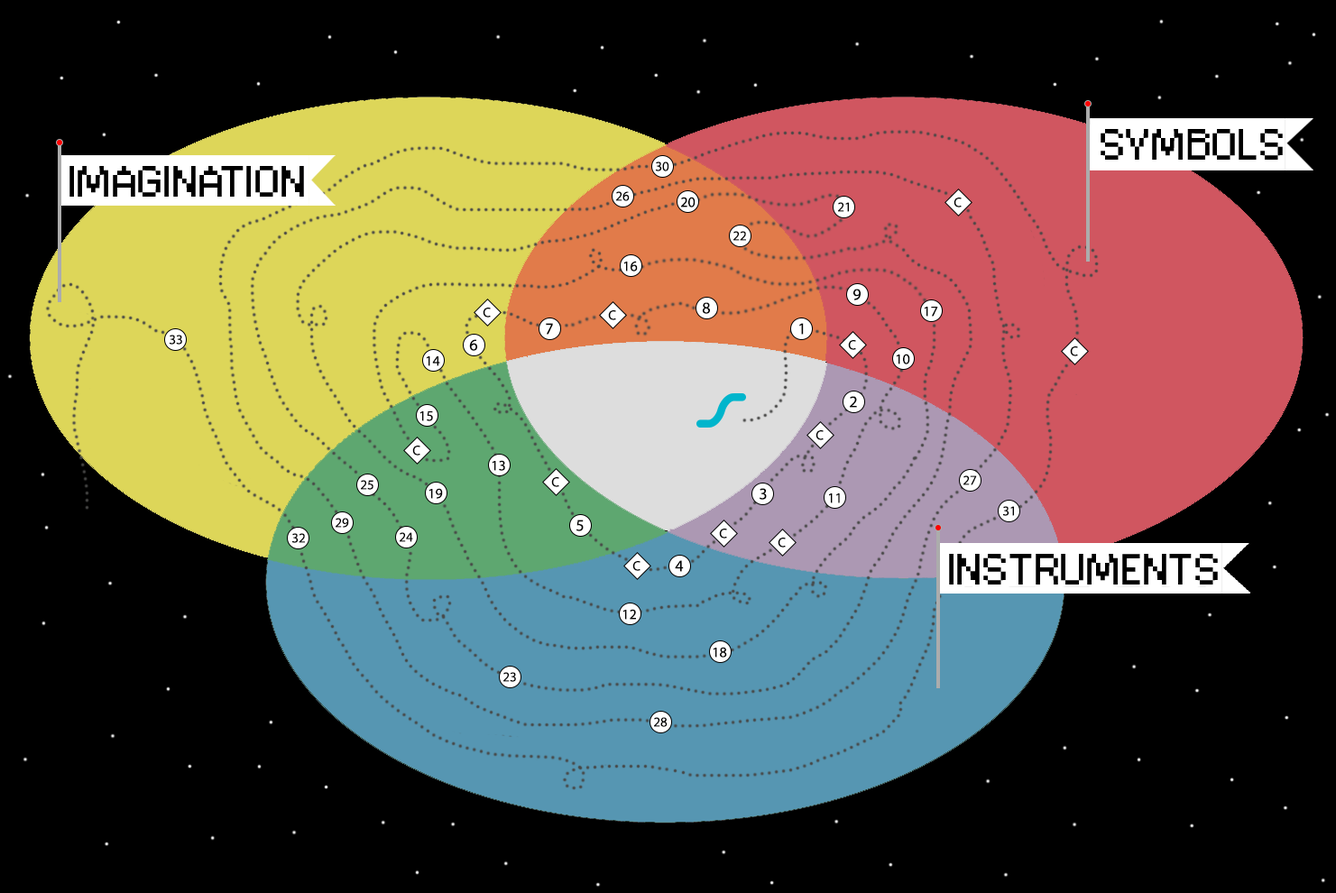
<style>
.page{position:relative;width:1336px;height:893px;background:#000000}
.page>*{position:absolute;margin:0}
.t1{font:43.3px "ConnectionII";color:#000000}
.t2{font:13.5px "MyriadPro-Regular";color:#000000}
.t3{font:14.4px "MyriadPro-Regular";color:#000000}
.t4{font:16.2px "MyriadPro-Regular";color:#000000}
</style>
<div class="page">
<p class="t1" style="left:1100px;top:129px;width:182px;height:31px">SYMBOLS</p>
<p class="t2" style="left:655px;top:161px;width:14px;height:10px">30</p>
<p class="t1" style="left:69px;top:166px;width:235px;height:31px">IMAGINATION</p>
<p class="t2" style="left:616px;top:191px;width:13px;height:10px">26</p>
<p class="t3" style="left:681px;top:197px;width:14px;height:10px">20</p>
<p class="t2" style="left:953px;top:197px;width:8px;height:10px">C</p>
<p class="t2" style="left:838px;top:202px;width:11px;height:10px">21</p>
<p class="t2" style="left:733px;top:231px;width:13px;height:10px">22</p>
<p class="t3" style="left:624px;top:261px;width:14px;height:10px">16</p>
<p class="t4" style="left:853px;top:289px;width:7px;height:11px">9</p>
<p class="t4" style="left:703px;top:302px;width:7px;height:12px">8</p>
<p class="t2" style="left:482px;top:308px;width:9px;height:9px">C</p>
<p class="t2" style="left:608px;top:310px;width:8px;height:10px">C</p>
<p class="t3" style="left:924px;top:307px;width:14px;height:10px">17</p>
<p class="t4" style="left:546px;top:323px;width:7px;height:12px">7</p>
<p class="t4" style="left:799px;top:323px;width:5px;height:12px">1</p>
<p class="t2" style="left:169px;top:335px;width:13px;height:9px">33</p>
<p class="t4" style="left:469px;top:339px;width:8px;height:12px">6</p>
<p class="t2" style="left:848px;top:340px;width:8px;height:10px">C</p>
<p class="t3" style="left:896px;top:354px;width:14px;height:10px">10</p>
<p class="t2" style="left:1070px;top:346px;width:8px;height:10px">C</p>
<p class="t3" style="left:427px;top:356px;width:13px;height:10px">14</p>
<p class="t4" style="left:850px;top:396px;width:7px;height:12px">2</p>
<p class="t3" style="left:420px;top:411px;width:13px;height:10px">15</p>
<p class="t2" style="left:815px;top:430px;width:8px;height:10px">C</p>
<p class="t2" style="left:412px;top:446px;width:8px;height:9px">C</p>
<p class="t3" style="left:492px;top:460px;width:13px;height:11px">13</p>
<p class="t2" style="left:361px;top:480px;width:12px;height:10px">25</p>
<p class="t2" style="left:551px;top:477px;width:8px;height:10px">C</p>
<p class="t2" style="left:963px;top:475px;width:14px;height:10px">27</p>
<p class="t3" style="left:429px;top:488px;width:14px;height:11px">19</p>
<p class="t4" style="left:759px;top:488px;width:8px;height:12px">3</p>
<p class="t3" style="left:829px;top:493px;width:11px;height:10px">11</p>
<p class="t2" style="left:1002px;top:506px;width:12px;height:10px">31</p>
<p class="t2" style="left:335px;top:518px;width:14px;height:10px">29</p>
<p class="t4" style="left:576px;top:519px;width:7px;height:12px">5</p>
<p class="t2" style="left:291px;top:533px;width:14px;height:10px">32</p>
<p class="t2" style="left:400px;top:532px;width:13px;height:10px">24</p>
<p class="t2" style="left:719px;top:528px;width:8px;height:10px">C</p>
<p class="t2" style="left:777px;top:537px;width:8px;height:10px">C</p>
<p class="t1" style="left:949px;top:554px;width:268px;height:30px">INSTRUMENTS</p>
<p class="t2" style="left:632px;top:561px;width:8px;height:10px">C</p>
<p class="t4" style="left:675px;top:560px;width:9px;height:12px">4</p>
<p class="t3" style="left:623px;top:609px;width:13px;height:11px">12</p>
<p class="t3" style="left:713px;top:647px;width:14px;height:10px">18</p>
<p class="t2" style="left:503px;top:672px;width:13px;height:10px">23</p>
<p class="t2" style="left:654px;top:717px;width:13px;height:10px">28</p>
</div>
